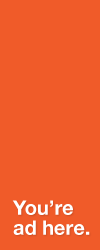
<style>
.page{position:relative;width:100px;height:250px;background:#f05b29}
.page>*{position:absolute;margin:0}
.t1{font:20px/20px "HelveticaNeue-Bold";color:#ffffff}
</style>
<div class="page">
<p class="t1" style="left:12px;top:200px;width:78px;height:35px">You’re ad here.</p>
</div>
